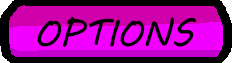
<style>
.page{position:relative;width:232px;height:63px;background:#000000}
.page>*{position:absolute;margin:0}
.t1{font:36px "MVBoli";color:#000000}
</style>
<div class="page">
<p class="t1" style="left:37px;top:16px;width:159px;height:31px">OPTIONS</p>
</div>
